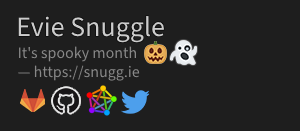
<style>
.page{position:relative;width:300px;height:131px;background:#1e1e1e}
.page>*{position:absolute;margin:0}
.t1{font:28px "SourceSans3-Regular";color:#cccccc}
.t2{font:16px "SourceSans3-Regular";color:#888888}
</style>
<div class="page">
<p class="t1" style="left:18px;top:16px;width:146px;height:27px">Evie Snuggle</p>
<p class="t2" style="left:18px;top:46px;width:122px;height:35px">It's spooky month<br>— https://snugg.ie</p>
</div>
